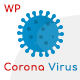
<style>
.page{position:relative;width:80px;height:80px;background:#f0f0f0}
.page>*{position:absolute;margin:0}
.t1{font:10px "Comfortaa-Bold";letter-spacing:0.04em;color:#d91010}
.t2{font:10px "Comfortaa-Bold";letter-spacing:0.04em;color:#d51212}
.t3{font:10px "Comfortaa-Bold";letter-spacing:0.04em;color:#0587bd}
</style>
<div class="page">
<p class="t1" style="left:4px;top:4px;width:17px;height:9px">WP</p>
<p class="t2" style="left:4px;top:62px;width:74px;height:9px">Corona<span class="t3"> Virus</span></p>
</div>
